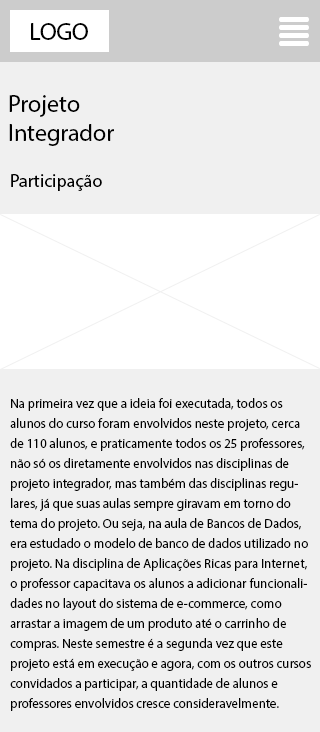
<style>
.page{position:relative;width:320px;height:732px;background:#f0f0f0}
.page>*{position:absolute;margin:0}
.t1{font:12px "MyriadPro-Regular";color:#000000}
.t2{font:18px "MyriadPro-Regular";color:#000000}
.t3{font:13px/20px "MyriadPro-Regular";color:#000000}
</style>
<div class="page">
<p class="t1" style="left:31px;top:23px;width:57px;height:17px">LOGO</p>
<p class="t1" style="left:9px;top:95px;width:105px;height:51px">Projeto<br>Integrador</p>
<p class="t2" style="left:11px;top:174px;width:91px;height:17px">Participação</p>
<p class="t3" style="left:10px;top:398px;width:301px;height:313px">Na primeira vez que a ideia foi executada, todos os alunos do curso foram envolvidos neste projeto, cerca de 110 alunos, e praticamente todos os 25 professores, não só os diretamente envolvidos nas disciplinas de projeto integrador, mas também das disciplinas regulares, já que suas aulas sempre giravam em torno do tema do projeto. Ou seja, na aula de Bancos de Dados, era estudado o modelo de banco de dados utilizado no projeto. Na disciplina de Aplicações Ricas para Internet, o professor capacitava os alunos a adicionar funcionalidades no layout do sistema de e-commerce, como arrastar a imagem de um produto até o carrinho de compras. Neste semestre é a segunda vez que este projeto está em execução e agora, com os outros cursos convidados a participar, a quantidade de alunos e professores envolvidos cresce consideravelmente.</p>
</div>
